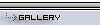
<style>
.page{position:relative;width:100px;height:25px;background:#ccd3de}
.page>*{position:absolute;margin:0}
.t1{font:8px "04b08";color:#000000}
</style>
<div class="page">
<p class="t1" style="left:19px;top:15px;width:41px;height:5px">gallery</p>
</div>
